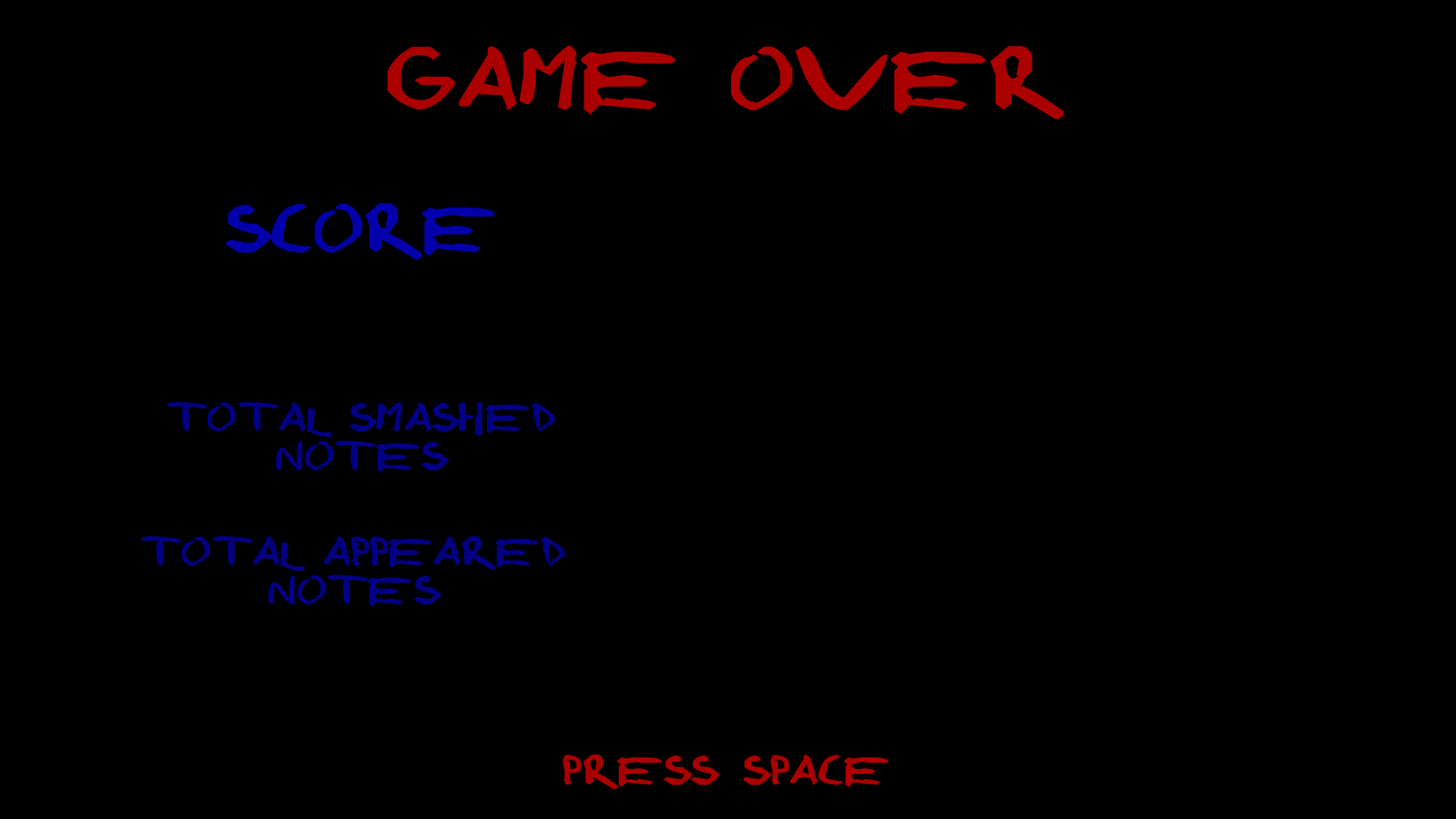
<style>
.page{position:relative;width:1456px;height:819px;background:#000000}
.page>*{position:absolute;margin:0}
.t1{font:69.8px "shonenpunk!custom";color:#ab0000;scale:1.36 1}
.t2{font:53.9px "shonenpunk!custom";color:#0400ab;scale:1.36 1}
.t3{font:32px "shonenpunk!custom";color:#030086;scale:1.36 1}
.t4{font:33.1px "shonenpunk!custom";color:#ab0000;scale:1.35 1}
</style>
<div class="page">
<p class="t1" style="left:388px;top:45px;width:676px;height:75px">game over</p>
<p class="t2" style="left:226px;top:203px;width:269px;height:57px">score</p>
<p class="t3" style="left:167px;top:402px;width:389px;height:70px;text-align:center">total smashed<br>notes</p>
<p class="t3" style="left:141px;top:536px;width:425px;height:71px;text-align:center">total appeared notes</p>
<p class="t4" style="left:563px;top:755px;width:326px;height:34px">Press space</p>
</div>
